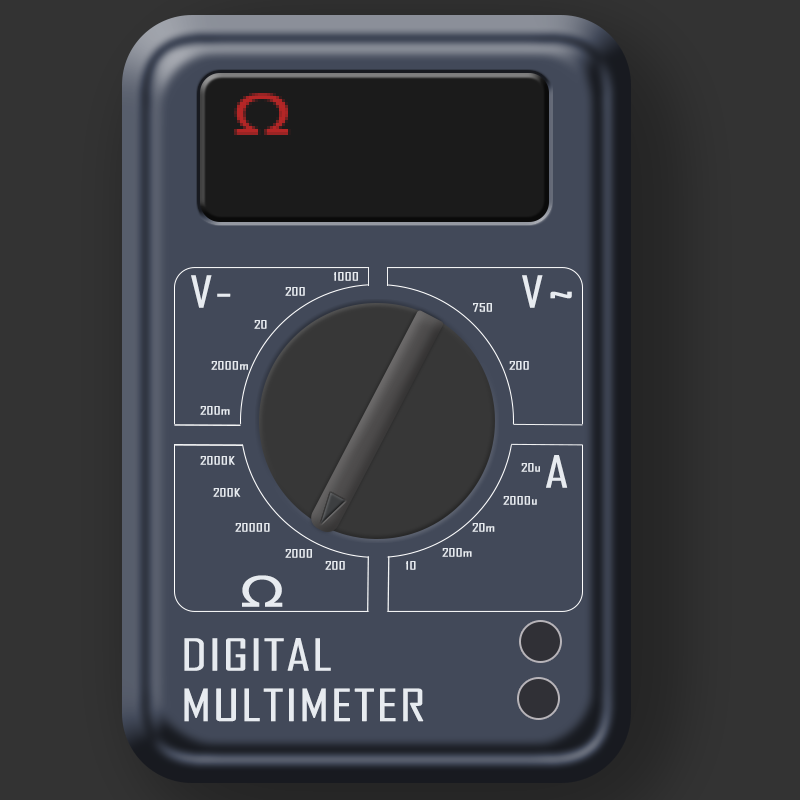
<style>
.page{position:relative;width:800px;height:800px;background:#424959}
.page>*{position:absolute;margin:0}
.t1{font:42px "AgencyFB-Reg";color:#e7ebf0;font-weight:bold;scale:1.44 1}
.t2{font:11px "AgencyFB-Reg";color:#e7ebf0;font-weight:bold;scale:1.44 1}
.t3{font:42px "ArialMT";letter-spacing:0.1em;color:#e7ebf0;font-weight:bold;scale:1.44 1}
</style>
<div class="page">
<p class="t1" style="left:191px;top:275px;width:40px;height:33px">V-</p>
<p class="t2" style="left:334px;top:272px;width:24px;height:9px">1000</p>
<p class="t1" style="left:522px;top:275px;width:50px;height:33px">V~</p>
<p class="t2" style="left:285px;top:287px;width:20px;height:9px">200</p>
<p class="t2" style="left:473px;top:303px;width:19px;height:9px">750</p>
<p class="t2" style="left:254px;top:320px;width:13px;height:9px">20</p>
<p class="t2" style="left:211px;top:361px;width:37px;height:9px">2000m</p>
<p class="t2" style="left:509px;top:361px;width:20px;height:9px">200</p>
<p class="t2" style="left:200px;top:406px;width:30px;height:9px">200m</p>
<p class="t2" style="left:200px;top:456px;width:35px;height:9px">2000K</p>
<p class="t1" style="left:546px;top:455px;width:22px;height:33px">A</p>
<p class="t2" style="left:521px;top:463px;width:19px;height:9px">20u</p>
<p class="t2" style="left:213px;top:488px;width:28px;height:9px">200K</p>
<p class="t2" style="left:503px;top:496px;width:34px;height:9px">2000u</p>
<p class="t2" style="left:235px;top:523px;width:35px;height:9px">20000</p>
<p class="t2" style="left:472px;top:523px;width:23px;height:9px">20m</p>
<p class="t2" style="left:285px;top:549px;width:27px;height:9px">2000</p>
<p class="t2" style="left:442px;top:548px;width:30px;height:9px">200m</p>
<p class="t2" style="left:325px;top:561px;width:20px;height:9px">200</p>
<p class="t2" style="left:406px;top:561px;width:10px;height:9px">10</p>
<p class="t3" style="left:242px;top:575px;width:41px;height:32px">Ω</p>
<p class="t1" style="left:184px;top:638px;width:240px;height:84px">DIGITAL<br>MULTIMETER</p>
</div>
